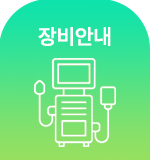
<style>
.page{position:relative;width:150px;height:160px}
.page>*{position:absolute;margin:0}
.t1{font:21.3px "Pretendard-SemiBold";color:#ffffff}
</style>
<div class="page">
<p class="t1" style="left:38px;top:27px;width:73px;height:19px">장비안내</p>
</div>
